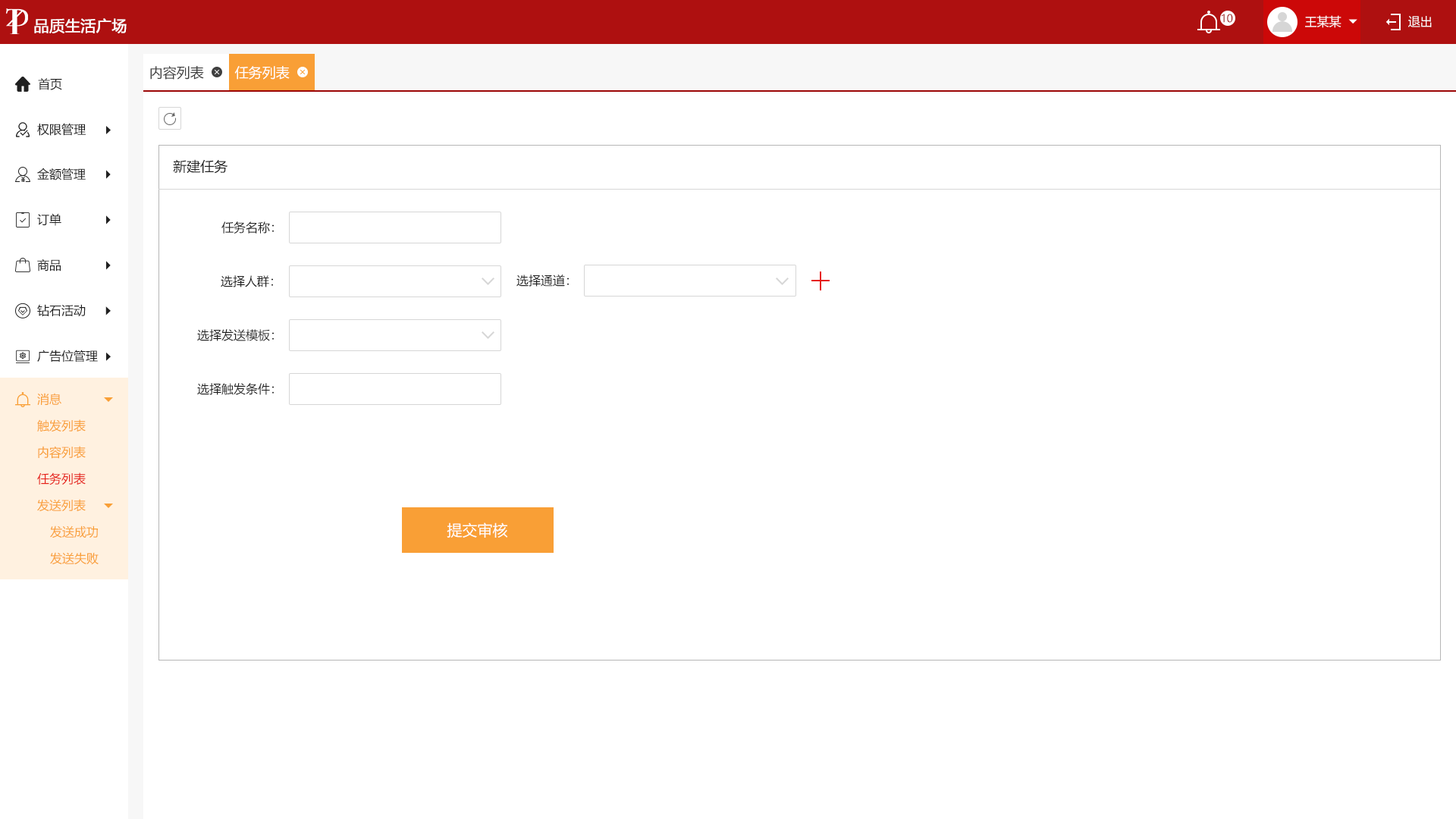
<style>
.page{position:relative;width:1456px;height:819px;background:#ffffff}
.page>*{position:absolute;margin:0}
.t1{font:10.6px "MicrosoftYaHei";color:#9c0606;text-transform:uppercase}
.t2{font:12.1px "MicrosoftYaHei";color:#ffffff;text-transform:uppercase}
.t3{font:15.2px "MicrosoftYaHei";color:#ffffff;text-transform:uppercase;font-weight:bold}
.t4{font:13.6px "MicrosoftYaHei";color:#404040;text-transform:uppercase}
.t5{font:13.6px "MicrosoftYaHei";color:#ffffff;text-transform:uppercase}
.t6{font:12.1px "MicrosoftYaHei";color:#202020;text-transform:uppercase}
.t7{font:13.6px "MicrosoftYaHei";color:#202020;text-transform:uppercase}
.t8{font:12.1px "MicrosoftYaHei";color:#f99f36;text-transform:uppercase}
.t9{font:12.1px "MicrosoftYaHei";color:#e61f18;text-transform:uppercase}
.t10{font:15.2px "MicrosoftYaHei";color:#ffffff}
</style>
<div class="page">
<p class="t1" style="left:1222px;top:14px;width:11px;height:9px">10</p>
<p class="t2" style="left:1305px;top:15px;width:36px;height:13px">王某某</p>
<p class="t2" style="left:1408px;top:16px;width:24px;height:11px">退出</p>
<p class="t3" style="left:34px;top:18px;width:93px;height:15px">品质生活广场</p>
<p class="t4" style="left:150px;top:66px;width:54px;height:14px">内容列表</p>
<p class="t5" style="left:234px;top:66px;width:56px;height:14px">任务列表</p>
<p class="t6" style="left:38px;top:78px;width:24px;height:12px">首页</p>
<p class="t6" style="left:37px;top:123px;width:49px;height:13px">权限管理</p>
<p class="t7" style="left:173px;top:159px;width:55px;height:15px">新建任务</p>
<p class="t6" style="left:37px;top:168px;width:49px;height:12px">金额管理</p>
<p class="t6" style="left:37px;top:213px;width:24px;height:13px">订单</p>
<p class="t6" style="left:221px;top:221px;width:53px;height:13px">任务名称：</p>
<p class="t6" style="left:37px;top:259px;width:24px;height:12px">商品</p>
<p class="t6" style="left:221px;top:275px;width:52px;height:12px">选择人群：</p>
<p class="t6" style="left:516px;top:275px;width:53px;height:12px">选择通道：</p>
<p class="t6" style="left:37px;top:304px;width:49px;height:12px">钻石活动</p>
<p class="t6" style="left:197px;top:329px;width:77px;height:12px">选择发送模板：</p>
<p class="t6" style="left:37px;top:350px;width:61px;height:12px">广告位管理</p>
<p class="t6" style="left:197px;top:383px;width:77px;height:12px">选择触发条件：</p>
<p class="t8" style="left:37px;top:393px;width:24px;height:12px">消息</p>
<p class="t8" style="left:37px;top:419px;width:49px;height:12px">触发列表</p>
<p class="t8" style="left:38px;top:446px;width:48px;height:13px">内容列表</p>
<p class="t9" style="left:37px;top:472px;width:49px;height:13px">任务列表</p>
<p class="t8" style="left:37px;top:499px;width:49px;height:12px">发送列表</p>
<p class="t8" style="left:50px;top:526px;width:48px;height:12px">发送成功</p>
<p class="t10" style="left:447px;top:522px;width:61px;height:16px">提交审核</p>
<p class="t8" style="left:50px;top:552px;width:49px;height:13px">发送失败</p>
</div>
